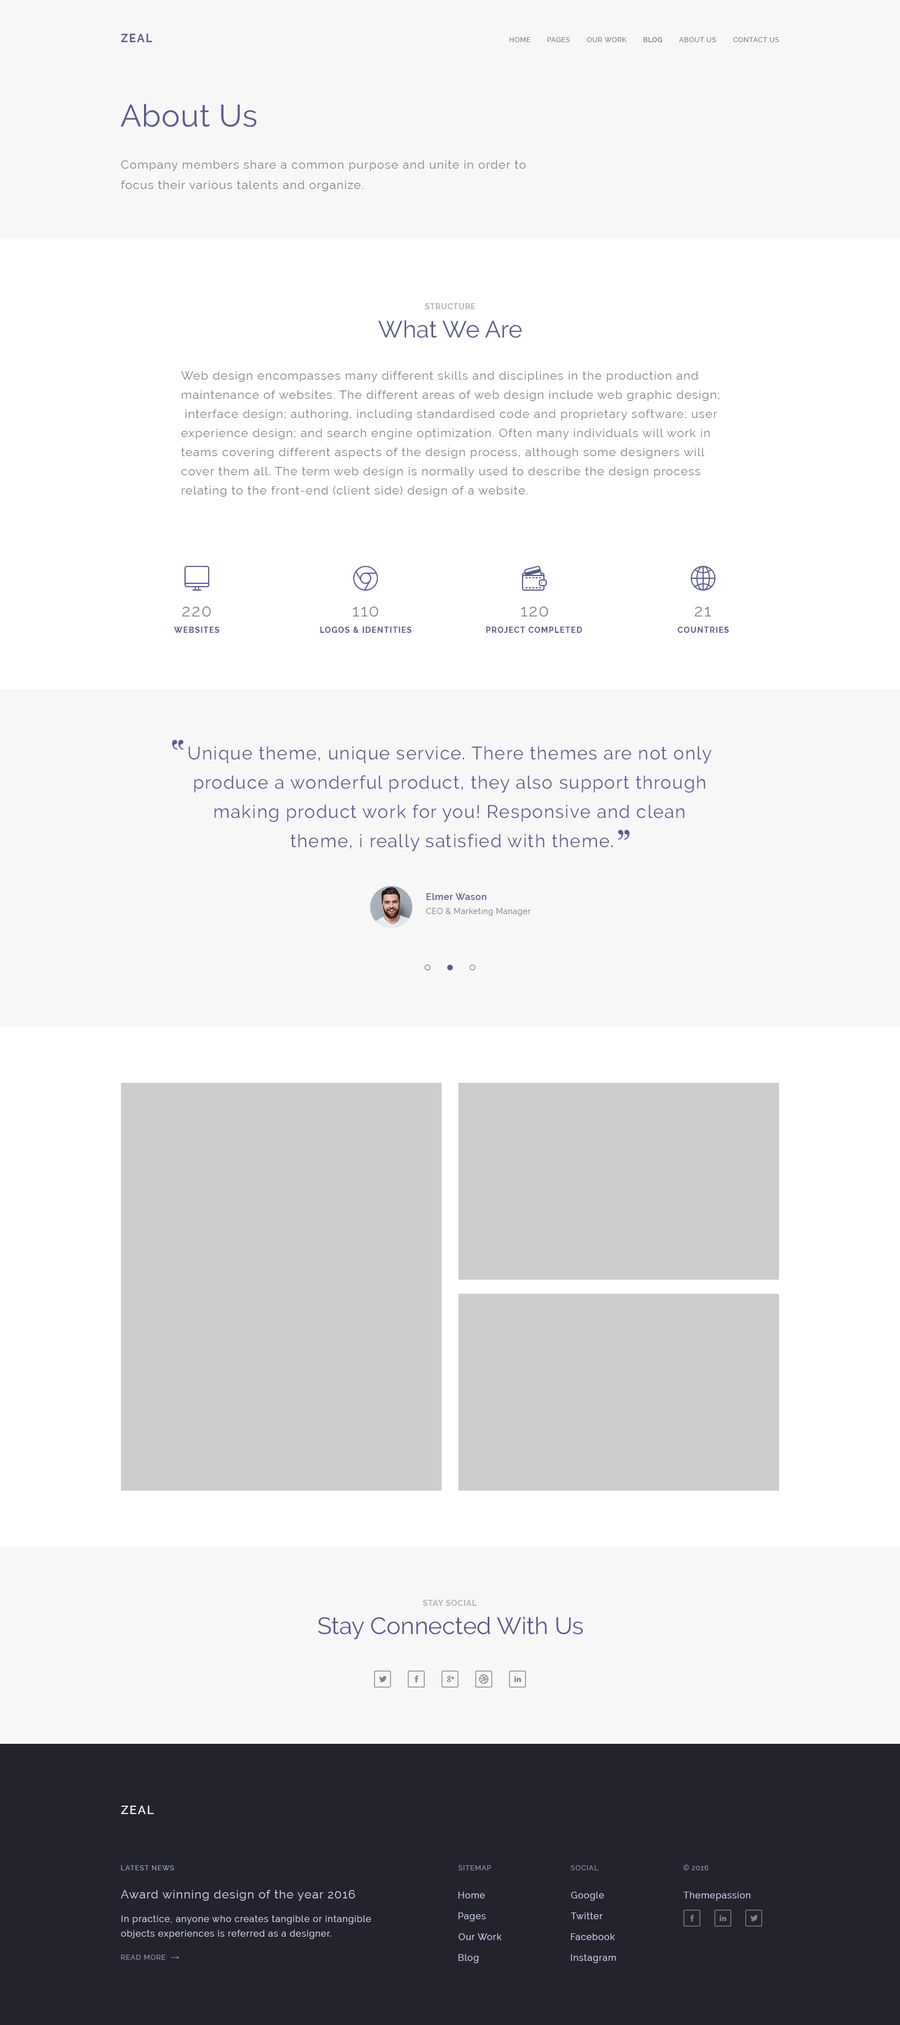
<style>
.page{position:relative;width:900px;height:2025px;background:#f7f7f7}
.page>*{position:absolute;margin:0}
.t1{font:11.2px "Raleway-Bold";letter-spacing:0.1em;color:#5a5a8c}
.t2{font:6.8px "Raleway-Medium";letter-spacing:0.06em;color:#82828c}
.t3{font:6.8px "Raleway-SemiBold";letter-spacing:0.06em;color:#82828c}
.t4{font:30.9px "Raleway-Regular";letter-spacing:0.02em;color:#5a5a8c}
.t5{font:11.8px/20.2px "Raleway-Regular";letter-spacing:0.06em;color:#82828c}
.t6{font:7.9px "Raleway-Bold";letter-spacing:0.06em;color:#b3b3bc}
.t7{font:23.6px "Raleway-Regular";color:#5a5a8c}
.t8{font:11.8px/19.1px "Raleway-Regular";letter-spacing:0.06em;color:#82828c}
.t9{font:16.9px "Raleway-Regular";letter-spacing:0.06em;color:#82828c}
.t10{font:7.9px "Raleway-Bold";letter-spacing:0.1em;color:#5a5a8c}
.t11{font:18px/29.2px "Raleway-Regular";letter-spacing:0.05em;color:#5a5a8c}
.t12{font:9px "Raleway-SemiBold";letter-spacing:0.051em;color:#5a5a8c}
.t13{font:7.9px "Raleway-Regular";letter-spacing:0.051em;color:#82828c}
.t14{font:11.8px "Raleway-SemiBold";letter-spacing:0.1em;color:#eeeeee}
.t15{font:6.8px "Raleway-Medium";letter-spacing:0.1em;color:#9797b8}
.t16{font:6.8px "Raleway-Regular";letter-spacing:0.1em;color:#9797b8}
.t17{font:11.8px "Raleway-Regular";letter-spacing:0.06em;color:#d0d0f0}
.t18{font:9px "Raleway-Regular";letter-spacing:0.06em;color:#d0d0f0}
.t19{font:9px/14.6px "Raleway-Regular";letter-spacing:0.06em;color:#d0d0f0}
</style>
<div class="page">
<p class="t1" style="left:121px;top:34px;width:31px;height:8px">ZEAL</p>
<p class="t2" style="left:510px;top:37px;width:20px;height:5px">HOME</p>
<p class="t2" style="left:547px;top:37px;width:23px;height:5px">PAGES</p>
<p class="t2" style="left:587px;top:37px;width:40px;height:5px">OUR WORK</p>
<p class="t3" style="left:644px;top:37px;width:19px;height:5px">BLOG</p>
<p class="t2" style="left:679px;top:37px;width:37px;height:5px">ABOUT US</p>
<p class="t2" style="left:733px;top:37px;width:46px;height:5px">CONTACT US</p>
<p class="t4" style="left:120px;top:104px;width:136px;height:23px">About Us</p>
<p class="t5" style="left:121px;top:160px;width:405px;height:31px;text-align:right">Company members share a common purpose and unite in order to<br>focus their various talents and organize.</p>
<p class="t6" style="left:425px;top:303px;width:50px;height:6px">STRUCTURE</p>
<p class="t7" style="left:378px;top:320px;width:144px;height:18px">What We Are</p>
<p class="t8" style="left:181px;top:371px;width:538px;height:126px;text-align:right">Web design encompasses many different skills and disciplines in the production and<br>maintenance of websites. The different areas of web design include web graphic design;<br> interface design; authoring, including standardised code and proprietary software; user<br>experience design; and search engine optimization. Often many individuals will work in<br>teams covering different aspects of the design process, although some designers will<br>cover them all. The term web design is normally used to describe the design process<br>relating to the front-end (client side) design of a website.</p>
<p class="t9" style="left:182px;top:606px;width:29px;height:11px">220</p>
<p class="t9" style="left:353px;top:606px;width:26px;height:11px">110</p>
<p class="t9" style="left:521px;top:606px;width:27px;height:11px">120</p>
<p class="t9" style="left:695px;top:606px;width:16px;height:10px">21</p>
<p class="t10" style="left:174px;top:627px;width:45px;height:6px">WEBSITES</p>
<p class="t10" style="left:320px;top:627px;width:92px;height:6px">LOGOS &amp; IDENTITIES</p>
<p class="t10" style="left:486px;top:627px;width:96px;height:6px">PROJECT COMPLETED</p>
<p class="t10" style="left:677px;top:627px;width:52px;height:6px">COUNTRIES</p>
<p class="t11" style="left:188px;top:746px;width:524px;height:106px;text-align:center">Unique theme, unique service. There themes are not only<br>produce a wonderful product, they also support through<br>making product work for you! Responsive and clean<br>theme, i really satisfied with theme.</p>
<p class="t12" style="left:426px;top:893px;width:61px;height:7px">Elmer Wason</p>
<p class="t13" style="left:426px;top:908px;width:105px;height:8px">CEO &amp; Marketing Manager</p>
<p class="t6" style="left:422px;top:1600px;width:55px;height:6px">STAY SOCIAL</p>
<p class="t7" style="left:318px;top:1617px;width:265px;height:23px">Stay Connected With Us</p>
<p class="t14" style="left:121px;top:1806px;width:33px;height:8px">ZEAL</p>
<p class="t15" style="left:121px;top:1865px;width:53px;height:5px">LATEST NEWS</p>
<p class="t16" style="left:458px;top:1865px;width:33px;height:5px">SITEMAP</p>
<p class="t16" style="left:571px;top:1865px;width:27px;height:5px">SOCIAL</p>
<p class="t16" style="left:692px;top:1865px;width:17px;height:5px">2016</p>
<p class="t17" style="left:121px;top:1890px;width:234px;height:11px">Award winning design of the year 2016</p>
<p class="t18" style="left:458px;top:1892px;width:27px;height:6px">Home</p>
<p class="t18" style="left:571px;top:1892px;width:33px;height:9px">Google</p>
<p class="t18" style="left:683px;top:1892px;width:67px;height:9px">Themepassion</p>
<p class="t18" style="left:458px;top:1912px;width:28px;height:10px">Pages</p>
<p class="t18" style="left:571px;top:1912px;width:32px;height:7px">Twitter</p>
<p class="t19" style="left:121px;top:1915px;width:250px;height:24px;text-align:right">In practice, anyone who creates tangible or intangible<br>objects experiences is referred as a designer.</p>
<p class="t18" style="left:458px;top:1933px;width:44px;height:7px">Our Work</p>
<p class="t18" style="left:571px;top:1933px;width:44px;height:7px">Facebook</p>
<p class="t16" style="left:121px;top:1955px;width:44px;height:5px">READ MORE</p>
<p class="t18" style="left:458px;top:1954px;width:21px;height:9px">Blog</p>
<p class="t18" style="left:571px;top:1954px;width:45px;height:9px">Instagram</p>
</div>
